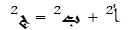
<style>
.page{position:relative;width:140px;height:30px;background:#ffffff}
.page>*{position:absolute;margin:0}
.t1{font:17.3px "Andalus";color:#000000;scale:1.12 1}
</style>
<div class="page">
<p class="t1" style="left:10px;top:4px;width:111px;height:25px">أ2 + ب2 = ج2</p>
</div>
